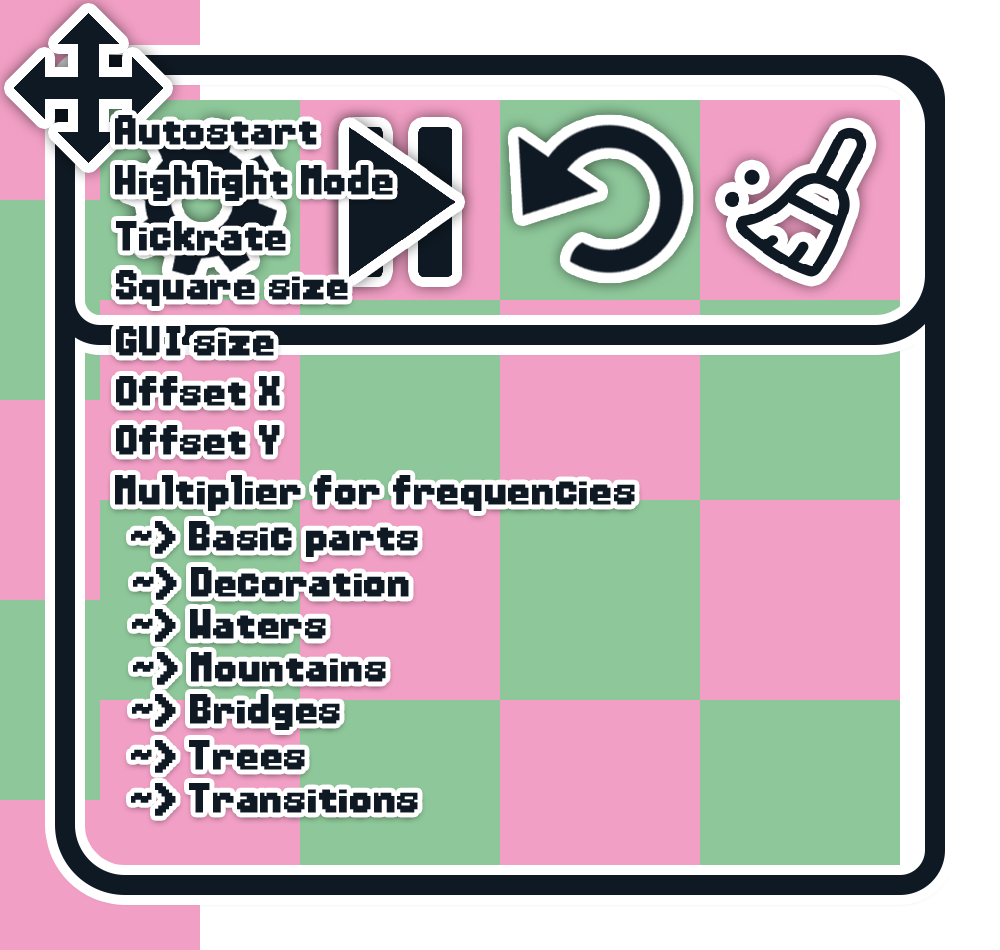
<style>
.page{position:relative;width:1000px;height:950px;background:#ffffff}
.page>*{position:absolute;margin:0}
.t1{font:42.1px "PowerClearBold";color:#0f1923;font-weight:bold}
</style>
<div class="page">
<p class="t1" style="left:115px;top:115px;width:202px;height:30px">Autostart</p>
<p class="t1" style="left:115px;top:165px;width:278px;height:36px">Highlight Mode</p>
<p class="t1" style="left:116px;top:221px;width:170px;height:30px">Tickrate</p>
<p class="t1" style="left:116px;top:270px;width:232px;height:36px">Square size</p>
<p class="t1" style="left:116px;top:326px;width:158px;height:30px">GUI size</p>
<p class="t1" style="left:116px;top:376px;width:164px;height:30px">Offset X</p>
<p class="t1" style="left:116px;top:425px;width:164px;height:30px">Offset Y</p>
<p class="t1" style="left:115px;top:475px;width:520px;height:36px">Multiplier for frequencies</p>
<p class="t1" style="left:131px;top:521px;width:287px;height:36px">~&gt; Basic parts</p>
<p class="t1" style="left:133px;top:567px;width:276px;height:33px">~&gt; Decoration</p>
<p class="t1" style="left:132px;top:609px;width:194px;height:33px">~&gt; Waters</p>
<p class="t1" style="left:133px;top:652px;width:253px;height:33px">~&gt; Mountains</p>
<p class="t1" style="left:132px;top:694px;width:208px;height:36px">~&gt; Bridges</p>
<p class="t1" style="left:131px;top:740px;width:174px;height:33px">~&gt; Trees</p>
<p class="t1" style="left:131px;top:783px;width:287px;height:33px">~&gt; Transitions</p>
</div>
